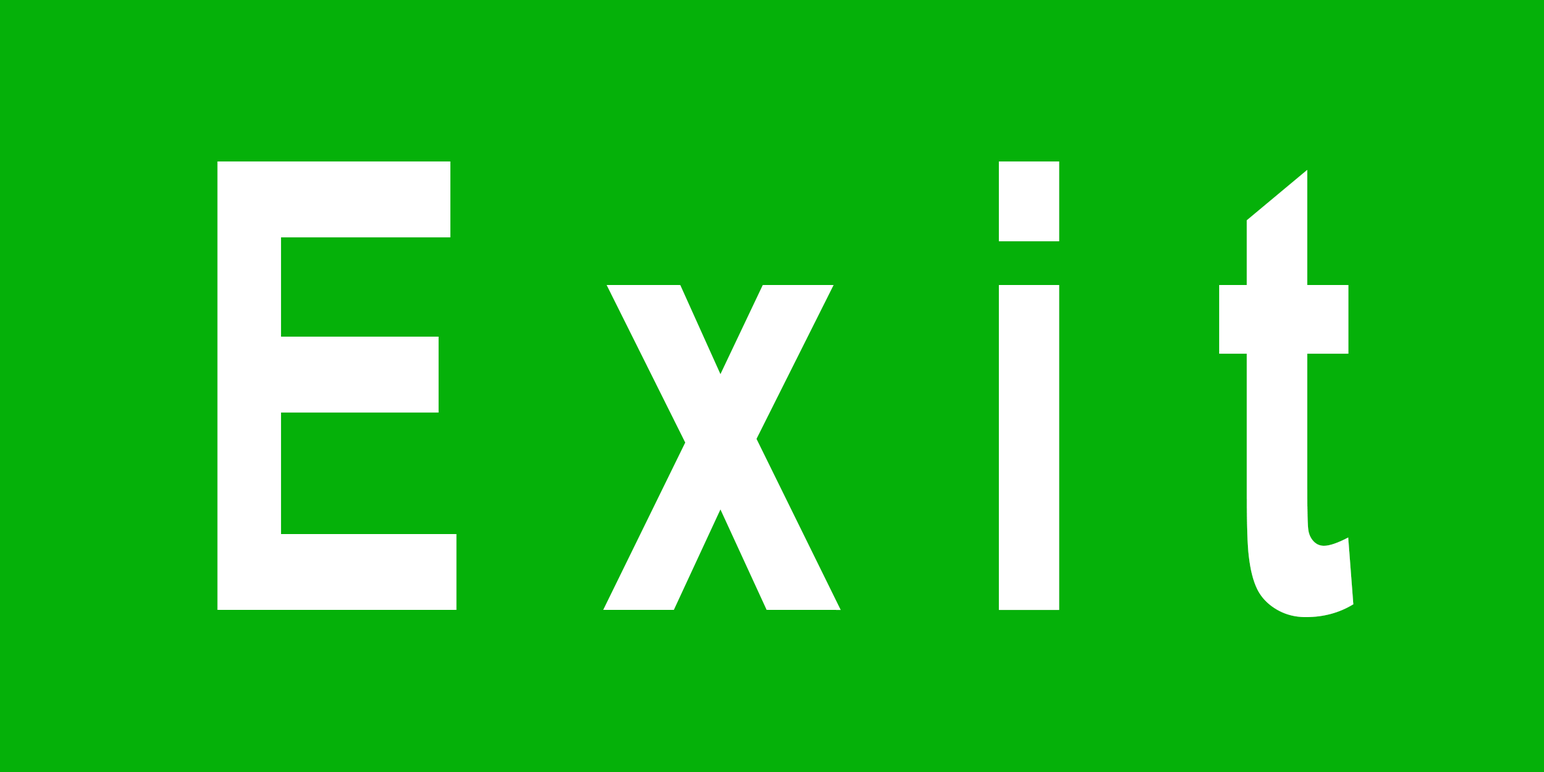
<style>
.page{position:relative;width:1544px;height:772px;background:#05b109}
.page>*{position:absolute;margin:0}
.t1{font:626.6px "Arial-BoldMT";letter-spacing:0.28em;color:#ffffff;scale:0.7 1}
</style>
<div class="page">
<p class="t1" style="left:217px;top:161px;width:1137px;height:456px">Exit</p>
</div>
